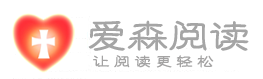
<style>
.page{position:relative;width:263px;height:79px;background:#ffffff}
.page>*{position:absolute;margin:0}
.t1{font:40px "Jtiejinlisu";color:#a5a5a5;font-weight:bold}
.t2{font:16px "Jtiejinlisu";color:#a4a3a3;font-weight:bold}
</style>
<div class="page">
<p class="t1" style="left:88px;top:20px;width:161px;height:31px">爱森阅读</p>
<p class="t2" style="left:93px;top:55px;width:121px;height:13px">让 阅 读 更 轻 松</p>
</div>
